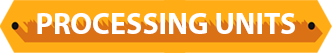
<style>
.page{position:relative;width:332px;height:53px;background:#ffac15}
.page>*{position:absolute;margin:0}
.t1{font:30px "MyriadPro-Bold";color:#ffffff}
</style>
<div class="page">
<p class="t1" style="left:37px;top:13px;width:258px;height:21px">PROCESSING UNITS</p>
</div>
